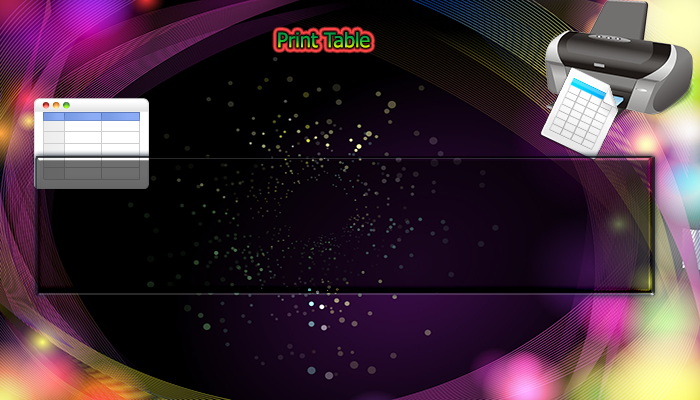
<style>
.page{position:relative;width:700px;height:400px}
.page>*{position:absolute;margin:0}
.t1{font:20px "Tahoma"}
</style>
<div class="page">
<p class="t1" style="left:278px;top:32px;width:92px;height:16px">Print Table</p>
</div>
